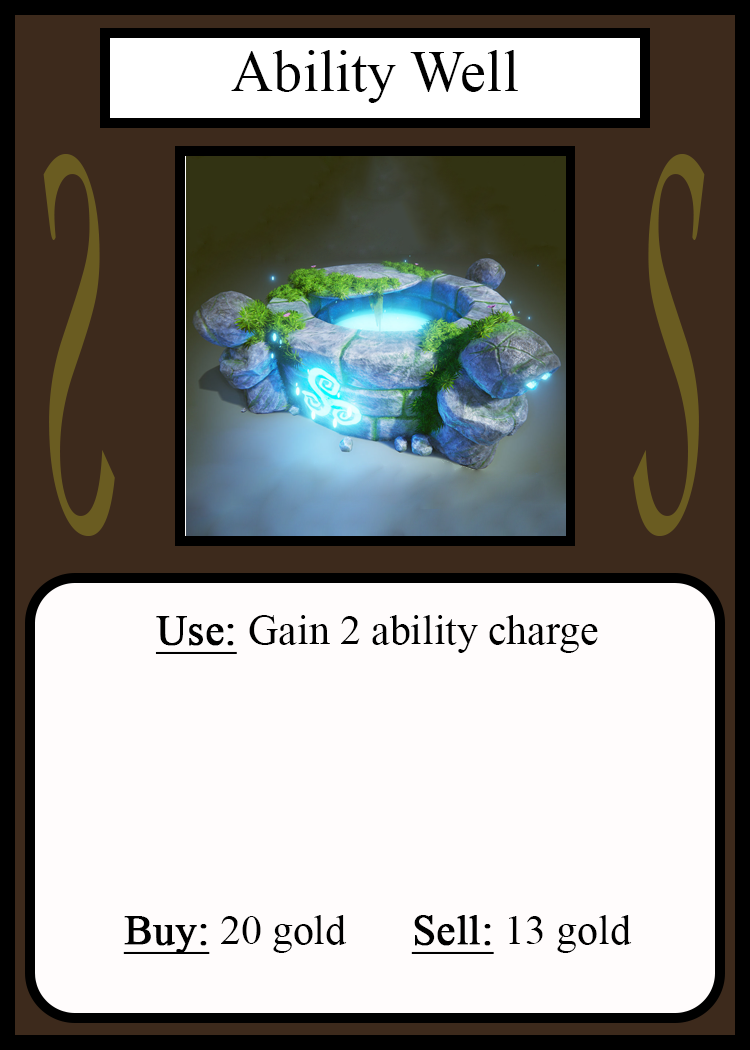
<style>
.page{position:relative;width:750px;height:1050px;background:#fffcfc}
.page>*{position:absolute;margin:0}
.t1{font:58.3px "TimesNewRomanPSMT";color:#010101}
.t2{font:548.5px "Apple-Chancery";color:#6a5c21;scale:0.27 1}
.t3{font:548.2px "Apple-Chancery";color:#6a5c21;scale:0.27 1}
.t4{font:41.7px "TimesNewRomanPSMT";color:#000000}
.t5{font:41.7px "TimesNewRomanPSMT";color:#000000;font-weight:bold;text-decoration:underline}
</style>
<div class="page">
<p class="t1" style="left:231px;top:50px;width:287px;height:53px">Ability Well</p>
<p class="t2" style="left:43px;top:154px;width:72px;height:382px;rotate:180deg">S</p>
<p class="t3" style="left:633px;top:154px;width:72px;height:382px">S</p>
<p class="t4" style="left:123px;top:615px;width:509px;height:339px;text-align:center"><span class="t5">Use: </span>Gain 2 ability charge<br><br><br><br><br><br><span class="t5">Buy:</span> 20 gold   <span class="t5">Sell:</span> 13 gold</p>
</div>
